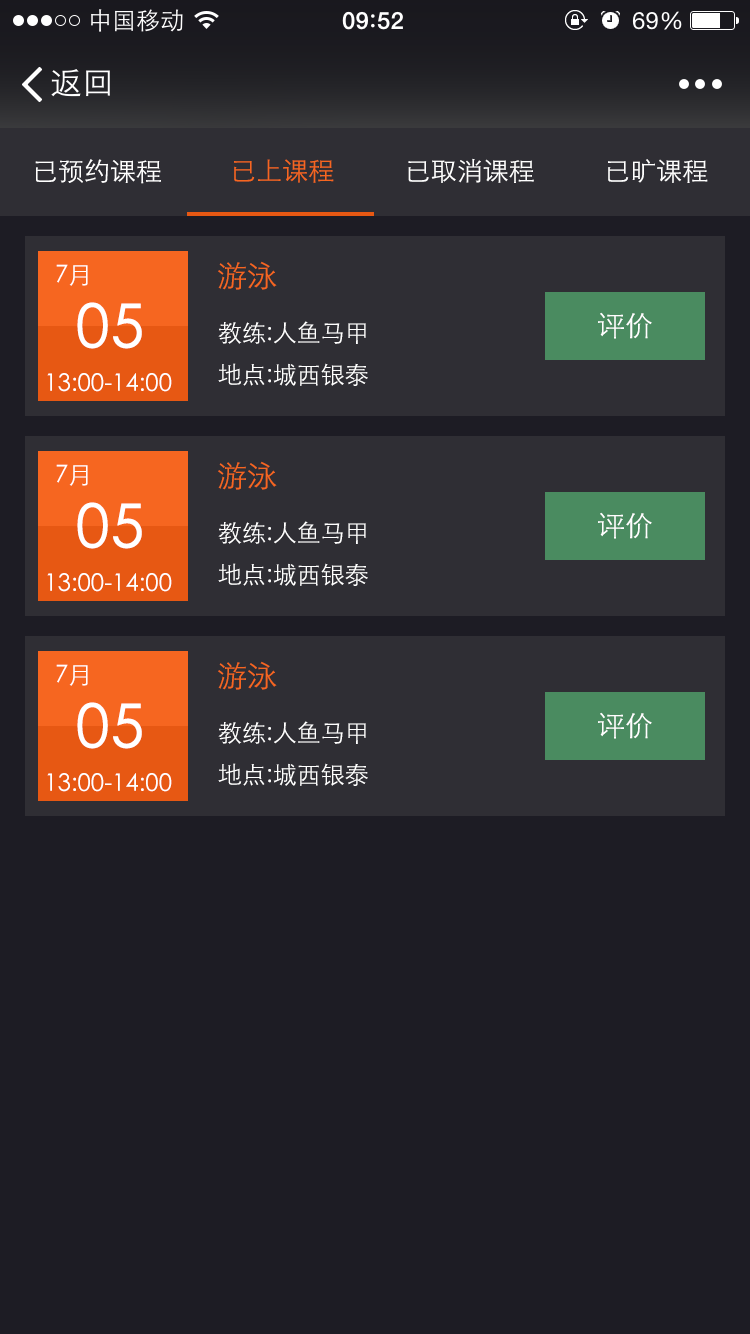
<style>
.page{position:relative;width:750px;height:1334px;background:#1d1c24}
.page>*{position:absolute;margin:0}
.t1{font:26px "STXihei";color:#ffffff}
.t2{font:26px "STXihei";color:#f66620}
.t3{font:24px "STXihei";color:#ffffff}
.t4{font:30px "STXihei";color:#f66620}
.t5{font:60px "STXihei";color:#ffffff;font-weight:bold}
.t6{font:28px "STXihei";color:#ffffff}
.t7{font:24px/42px "STXihei";color:#ffffff}
</style>
<div class="page">
<p class="t1" style="left:35px;top:159px;width:126px;height:25px">已预约课程</p>
<p class="t2" style="left:234px;top:159px;width:100px;height:24px">已上课程</p>
<p class="t1" style="left:408px;top:158px;width:126px;height:25px">已取消课程</p>
<p class="t1" style="left:608px;top:159px;width:100px;height:24px">已旷课程</p>
<p class="t3" style="left:56px;top:264px;width:32px;height:22px">7月</p>
<p class="t4" style="left:218px;top:261px;width:59px;height:29px">游泳</p>
<p class="t5" style="left:77px;top:302px;width:65px;height:47px">05</p>
<p class="t6" style="left:598px;top:312px;width:54px;height:27px">评价</p>
<p class="t7" style="left:218px;top:321px;width:150px;height:65px">教练:人鱼马甲<br>地点:城西银泰</p>
<p class="t3" style="left:47px;top:373px;width:125px;height:19px">13:00-14:00</p>
<p class="t4" style="left:218px;top:461px;width:59px;height:29px">游泳</p>
<p class="t3" style="left:56px;top:464px;width:32px;height:22px">7月</p>
<p class="t5" style="left:77px;top:502px;width:65px;height:47px">05</p>
<p class="t7" style="left:218px;top:521px;width:150px;height:65px">教练:人鱼马甲<br>地点:城西银泰</p>
<p class="t6" style="left:598px;top:512px;width:54px;height:27px">评价</p>
<p class="t3" style="left:47px;top:573px;width:125px;height:19px">13:00-14:00</p>
<p class="t3" style="left:56px;top:664px;width:32px;height:22px">7月</p>
<p class="t4" style="left:218px;top:661px;width:59px;height:29px">游泳</p>
<p class="t5" style="left:77px;top:702px;width:65px;height:47px">05</p>
<p class="t6" style="left:598px;top:712px;width:54px;height:27px">评价</p>
<p class="t7" style="left:218px;top:721px;width:150px;height:65px">教练:人鱼马甲<br>地点:城西银泰</p>
<p class="t3" style="left:47px;top:773px;width:125px;height:19px">13:00-14:00</p>
</div>
